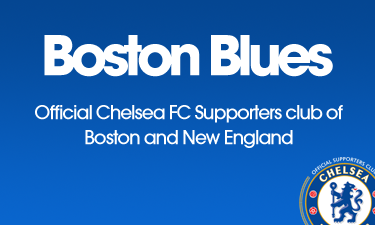
<style>
.page{position:relative;width:375px;height:225px}
.page>*{position:absolute;margin:0}
.t1{font:60.4px "AvantGardeMdITCTTBold";letter-spacing:-0.08em;color:#ffffff}
.t2{font:20.8px "AvantGardeMdITCTT";letter-spacing:-0.05em;color:#ffffff}
</style>
<div class="page">
<p class="t1" style="left:44px;top:35px;width:289px;height:42px">Boston Blues</p>
<p class="t2" style="left:35px;top:105px;width:308px;height:43px;text-align:center">Official Chelsea FC Supporters club of Boston and New England</p>
</div>
